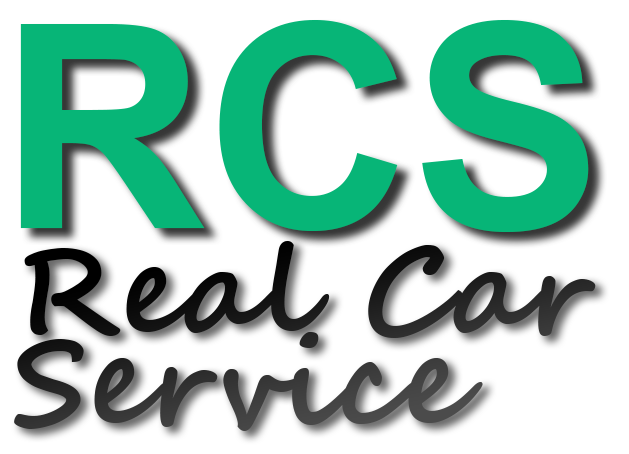
<style>
.page{position:relative;width:629px;height:454px;background:#ffffff}
.page>*{position:absolute;margin:0}
.t1{font:285px "Arial-BoldMT";color:#07b577}
.t2{font:120px/91px "SegoeScript-Bold";color:#191919}
</style>
<div class="page">
<p class="t1" style="left:20px;top:20px;width:569px;height:212px">RCS</p>
<p class="t2" style="left:14px;top:241px;width:582px;height:190px">Real Car<br>Service</p>
</div>
